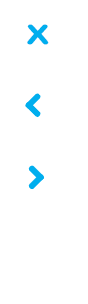
<style>
.page{position:relative;width:88px;height:304px;background:#ffffff}
.page>*{position:absolute;margin:0}
.t1{font:37.1px "ArialRoundedMTBold";color:#00aeee;scale:1.21 1}
</style>
<div class="page">
<p class="t1" style="left:27px;top:24px;width:22px;height:21px">x</p>
</div>
